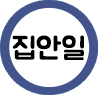
<style>
.page{position:relative;width:98px;height:95px;background:#ffffff}
.page>*{position:absolute;margin:0}
.t1{font:30px "BMJUA";color:#000000}
</style>
<div class="page">
<p class="t1" style="left:12px;top:35px;width:72px;height:25px">집안일</p>
</div>
